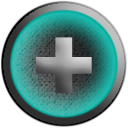
<style>
.page{position:relative;width:128px;height:128px;background:#ffffff}
.page>*{position:absolute;margin:0}
.t1{font:113.8px "UTM-Akashi";letter-spacing:0.05em}
</style>
<div class="page">
<p class="t1" style="left:36px;top:37px;width:56px;height:57px">+</p>
</div>
